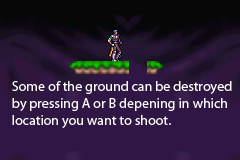
<style>
.page{position:relative;width:240px;height:160px;background:#301644}
.page>*{position:absolute;margin:0}
.t1{font:14px "MyriadPro-Regular";color:#fefcfc}
</style>
<div class="page">
<p class="t1" style="left:12px;top:81px;width:220px;height:47px">Some of the ground can be destroyed by pressing A or B depening in which location you want to shoot.</p>
</div>
